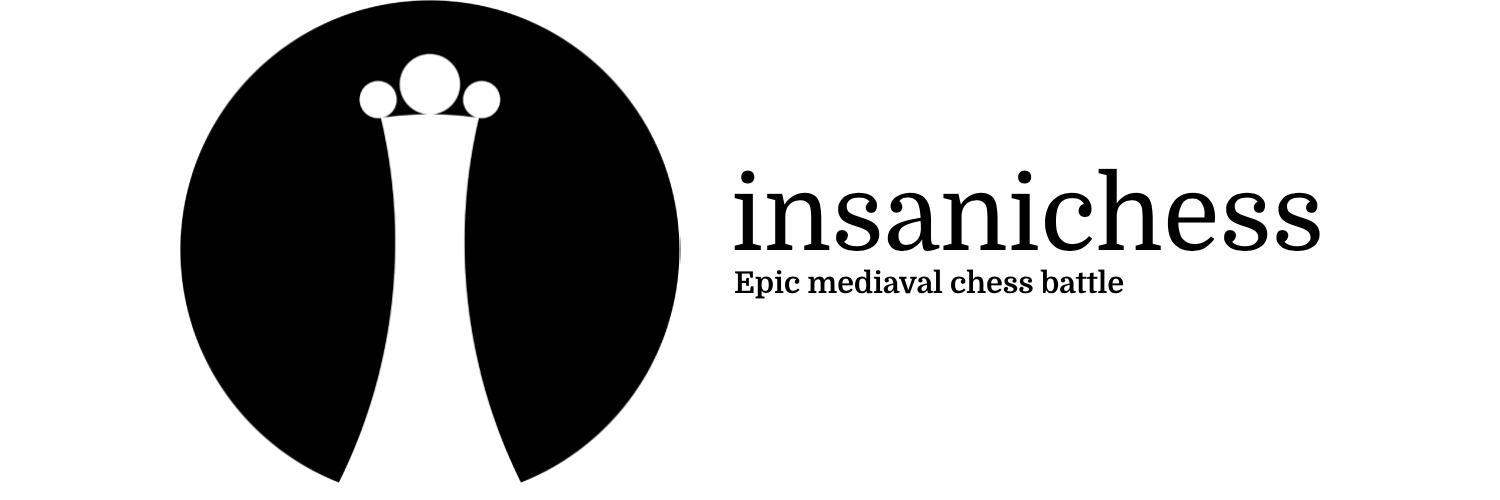
<style>
.page{position:relative;width:1500px;height:500px;background:#ffffff}
.page>*{position:absolute;margin:0}
.t1{font:104px "Domine-Regular";color:#000000}
.t2{font:30px "Domine-Bold";color:#000000}
</style>
<div class="page">
<p class="t1" style="left:734px;top:168px;width:586px;height:84px">insanichess</p>
<p class="t2" style="left:735px;top:269px;width:389px;height:30px">Epic mediaval chess battle</p>
</div>
